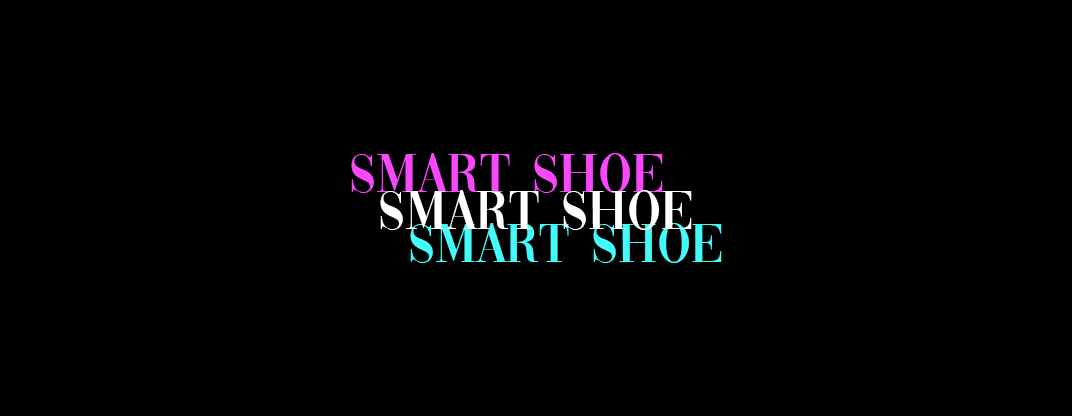
<style>
.page{position:relative;width:1072px;height:416px;background:#000000}
.page>*{position:absolute;margin:0}
.t1{font:57px "Vogue-Regular";color:#f948fb}
.t2{font:57px "Vogue-Regular";color:#ffffff}
.t3{font:57px "Vogue-Regular";color:#43fbf8}
</style>
<div class="page">
<p class="t1" style="left:351px;top:153px;width:312px;height:40px">SMART SHOE</p>
<p class="t2" style="left:380px;top:190px;width:312px;height:40px">SMART SHOE</p>
<p class="t3" style="left:410px;top:223px;width:312px;height:40px">SMART SHOE</p>
</div>
